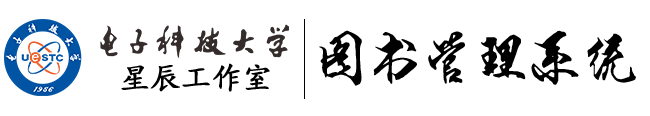
<style>
.page{position:relative;width:650px;height:116px;background:#ffffff}
.page>*{position:absolute;margin:0}
.t1{font:60px "duanningmaobixingsu";color:#000000;scale:0.9 1}
.t2{font:30px "KaiTi";color:#000000;font-weight:bold}
</style>
<div class="page">
<p class="t1" style="left:319px;top:30px;width:317px;height:56px">图书管理系统</p>
<p class="t2" style="left:121px;top:63px;width:149px;height:29px">星辰工作室</p>
</div>
